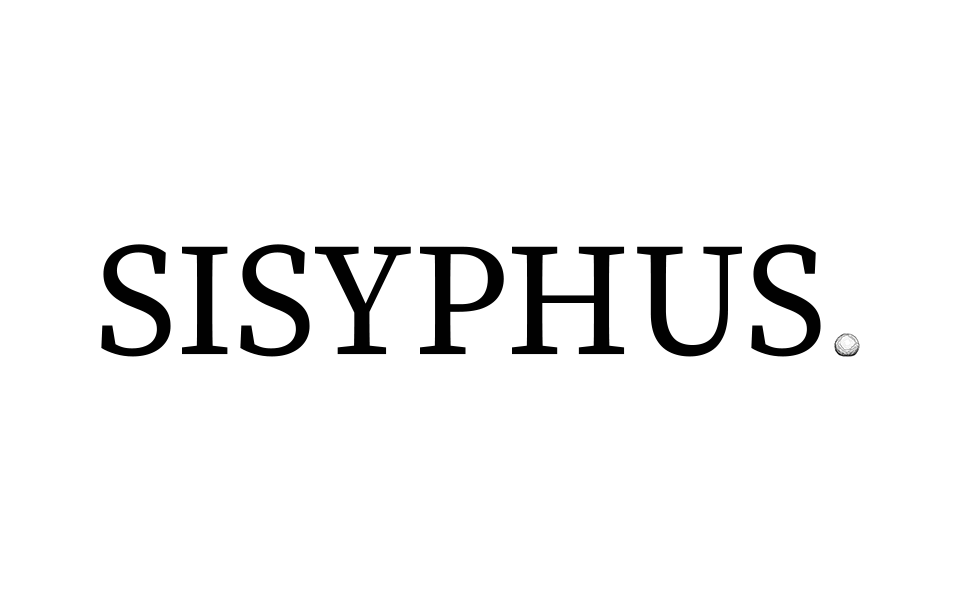
<style>
.page{position:relative;width:960px;height:600px;background:#ffffff}
.page>*{position:absolute;margin:0}
.t1{font:160px "SourceSerif4Roman-Regular";color:#010101}
</style>
<div class="page">
<p class="t1" style="left:101px;top:244px;width:758px;height:113px">SISYPHUS.</p>
</div>
